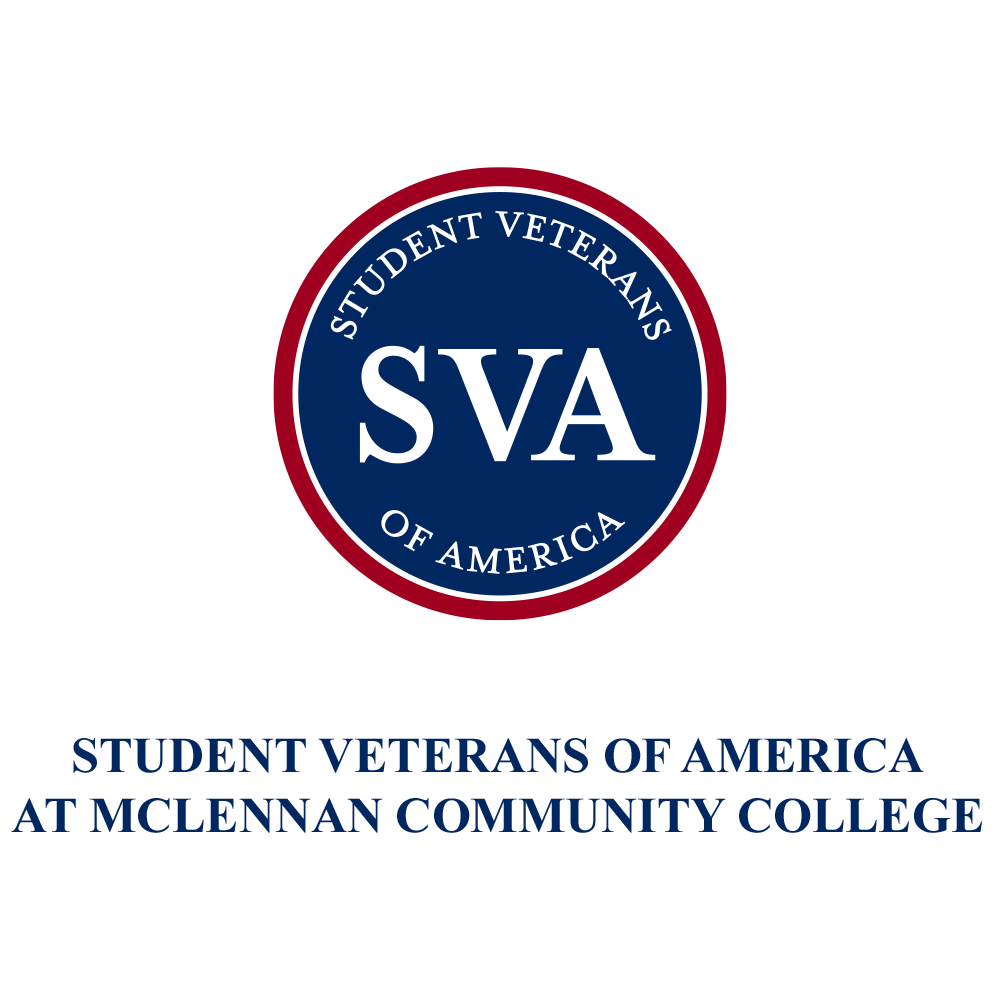
<style>
.page{position:relative;width:1000px;height:1000px;background:#ffffff}
.page>*{position:absolute;margin:0}
.t1{font:50px "TimesNewRomanPS-BoldMT";color:#002760}
</style>
<div class="page">
<p class="t1" style="left:11px;top:738px;width:971px;height:95px;text-align:center">STUDENT VETERANS OF AMERICA<br>AT MCLENNAN COMMUNITY COLLEGE</p>
</div>
